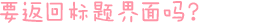
<style>
.page{position:relative;width:261px;height:23px;background:#ffffff}
.page>*{position:absolute;margin:0}
.t1{font:26px "¢è?";color:#ff93a5}
</style>
<div class="page">
<p class="t1" style="left:0px;top:1px;width:199px;height:22px">要返回标题界面吗？</p>
</div>
